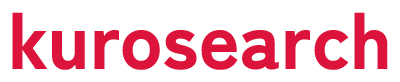
<style>
.page{position:relative;width:400px;height:82px;background:#ffffff}
.page>*{position:absolute;margin:0}
.t1{font:79px "ZenKakuGothicNew-Black";color:#dc143c}
</style>
<div class="page">
<p class="t1" style="left:12px;top:12px;width:376px;height:58px">kurosearch</p>
</div>
